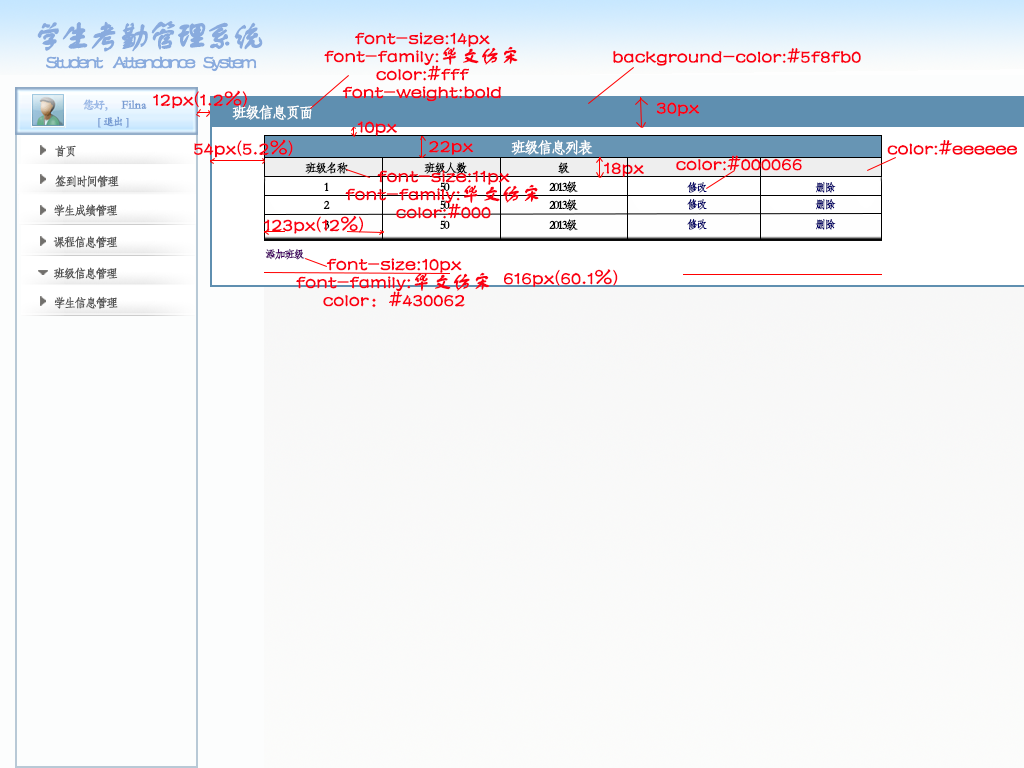
<style>
.page{position:relative;width:1024px;height:768px}
.page>*{position:absolute;margin:0}
.t1{font:32.7px "FZSTK--GBK1-0";letter-spacing:-0.15em;color:#89abde;font-weight:bold}
.t2{font:19.6px/18px "FZSTK--GBK1-0";color:#fb0012;font-weight:bold}
.t3{font:19.6px "FZSTK--GBK1-0";color:#fb0012;font-weight:bold}
.t4{font:19.6px "FZSTK--GBK1-0";letter-spacing:-0.15em;color:#89abde;font-weight:bold}
.t5{font:12px "STKaiti";letter-spacing:-0.15em;color:#99b7e5;font-weight:bold}
.t6{font:12px "STKaiti";color:#789cd3;font-weight:bold}
.t7{font:15.3px "STFangsong";letter-spacing:-0.15em;color:#fdfefe;font-weight:bold}
.t8{font:10.9px "STKaiti";letter-spacing:-0.15em;color:#789cd3;font-weight:bold}
.t9{font:12px "STFangsong";letter-spacing:-0.15em;color:#555555;font-weight:bold}
.t10{font:12px "STFangsong";letter-spacing:-0.15em;color:#020202;font-weight:bold}
.t11{font:10.9px "STFangsong";letter-spacing:-0.15em;color:#000066;font-weight:bold}
.t12{font:10.9px "STFangsong";letter-spacing:-0.15em;color:#430062;font-weight:bold}
</style>
<div class="page">
<p class="t1" style="left:37px;top:21px;width:226px;height:31px">学生考勤管理系统</p>
<p class="t2" style="left:324px;top:32px;width:194px;height:70px;text-align:center">font-size:14px<br>font-family:华文仿宋<br>color:#fff<br>font-weight:bold</p>
<p class="t3" style="left:613px;top:48px;width:248px;height:18px">background-color:#5f8fb0</p>
<p class="t4" style="left:46px;top:56px;width:211px;height:16px">Student     Attendance    System</p>
<p class="t5" style="left:83px;top:99px;width:25px;height:12px">您好，</p>
<p class="t6" style="left:121px;top:100px;width:26px;height:9px">Filna</p>
<p class="t3" style="left:153px;top:90px;width:94px;height:19px">12px(1.2%)</p>
<p class="t3" style="left:656px;top:102px;width:44px;height:15px">30px</p>
<p class="t7" style="left:232px;top:105px;width:81px;height:15px">班级信息页面</p>
<p class="t8" style="left:98px;top:116px;width:31px;height:12px">[   退出   ]</p>
<p class="t3" style="left:357px;top:121px;width:40px;height:15px">10px</p>
<p class="t9" style="left:55px;top:145px;width:21px;height:12px">首页</p>
<p class="t3" style="left:194px;top:139px;width:99px;height:19px">54px(5.2%)</p>
<p class="t3" style="left:429px;top:140px;width:45px;height:15px">22px</p>
<p class="t7" style="left:511px;top:139px;width:82px;height:16px">班级信息列表</p>
<p class="t3" style="left:887px;top:140px;width:130px;height:15px">color:#eeeeee</p>
<p class="t3" style="left:676px;top:155px;width:126px;height:16px">color:#000066</p>
<p class="t10" style="left:305px;top:162px;width:43px;height:12px">班级名称</p>
<p class="t2" style="left:345px;top:170px;width:194px;height:49px;text-align:center">font-size:11px<br>font-family:华文仿宋<br>color:#000</p>
<p class="t10" style="left:424px;top:162px;width:43px;height:12px">班级人数</p>
<p class="t10" style="left:558px;top:162px;width:12px;height:12px">级</p>
<p class="t3" style="left:604px;top:162px;width:40px;height:15px">18px</p>
<p class="t9" style="left:55px;top:175px;width:64px;height:13px">签到时间管理</p>
<p class="t10" style="left:324px;top:182px;width:5px;height:9px">1</p>
<p class="t10" style="left:440px;top:182px;width:10px;height:9px">50</p>
<p class="t10" style="left:549px;top:181px;width:29px;height:12px">2013级</p>
<p class="t11" style="left:687px;top:181px;width:20px;height:12px">修改</p>
<p class="t11" style="left:815px;top:182px;width:21px;height:11px">删除</p>
<p class="t11" style="left:687px;top:198px;width:20px;height:12px">修改</p>
<p class="t9" style="left:54px;top:204px;width:64px;height:13px">学生成绩管理</p>
<p class="t10" style="left:323px;top:200px;width:7px;height:9px">2</p>
<p class="t10" style="left:440px;top:200px;width:10px;height:9px">50</p>
<p class="t10" style="left:549px;top:199px;width:29px;height:12px">2013级</p>
<p class="t11" style="left:815px;top:199px;width:21px;height:11px">删除</p>
<p class="t3" style="left:264px;top:215px;width:99px;height:19px">123px(12%)</p>
<p class="t10" style="left:324px;top:220px;width:6px;height:9px">3</p>
<p class="t10" style="left:440px;top:220px;width:10px;height:9px">50</p>
<p class="t10" style="left:549px;top:219px;width:29px;height:12px">2013级</p>
<p class="t11" style="left:687px;top:218px;width:20px;height:12px">修改</p>
<p class="t11" style="left:815px;top:219px;width:21px;height:11px">删除</p>
<p class="t9" style="left:53px;top:236px;width:65px;height:13px">课程信息管理</p>
<p class="t12" style="left:265px;top:248px;width:40px;height:12px">添加班级</p>
<p class="t9" style="left:54px;top:267px;width:64px;height:13px">班级信息管理</p>
<p class="t2" style="left:296px;top:258px;width:194px;height:50px;text-align:center">font-size:10px<br>font-family:华文仿宋<br>color：#430062</p>
<p class="t3" style="left:504px;top:269px;width:114px;height:19px">616px(60.1%)</p>
<p class="t9" style="left:54px;top:296px;width:64px;height:13px">学生信息管理</p>
</div>
